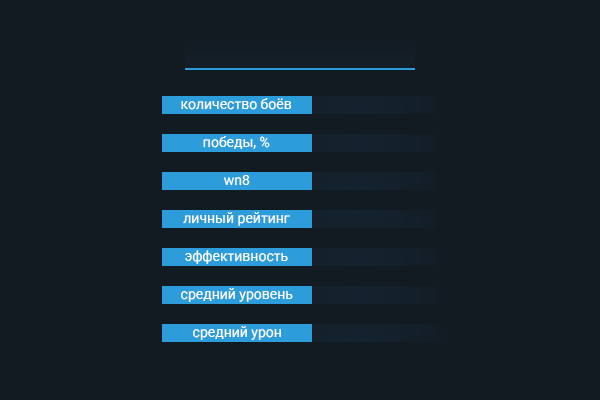
<style>
.page{position:relative;width:600px;height:400px;background:#121a22}
.page>*{position:absolute;margin:0}
.t1{font:14px "Roboto-Regular";color:#ffffff}
</style>
<div class="page">
<p class="t1" style="left:181px;top:98px;width:111px;height:12px">количество боёв</p>
<p class="t1" style="left:203px;top:136px;width:67px;height:13px">победы, %</p>
<p class="t1" style="left:224px;top:175px;width:26px;height:11px">wn8</p>
<p class="t1" style="left:183px;top:212px;width:107px;height:14px">личный рейтинг</p>
<p class="t1" style="left:185px;top:250px;width:103px;height:14px">эффективность</p>
<p class="t1" style="left:181px;top:288px;width:112px;height:14px">средний уровень</p>
<p class="t1" style="left:193px;top:326px;width:88px;height:14px">средний урон</p>
</div>
